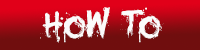
<style>
.page{position:relative;width:200px;height:50px;background:#700e0e}
.page>*{position:absolute;margin:0}
.t1{font:55.4px "YouMurdererBB";color:#fbfbfb}
</style>
<div class="page">
<p class="t1" style="left:40px;top:7px;width:124px;height:36px">How To</p>
</div>
